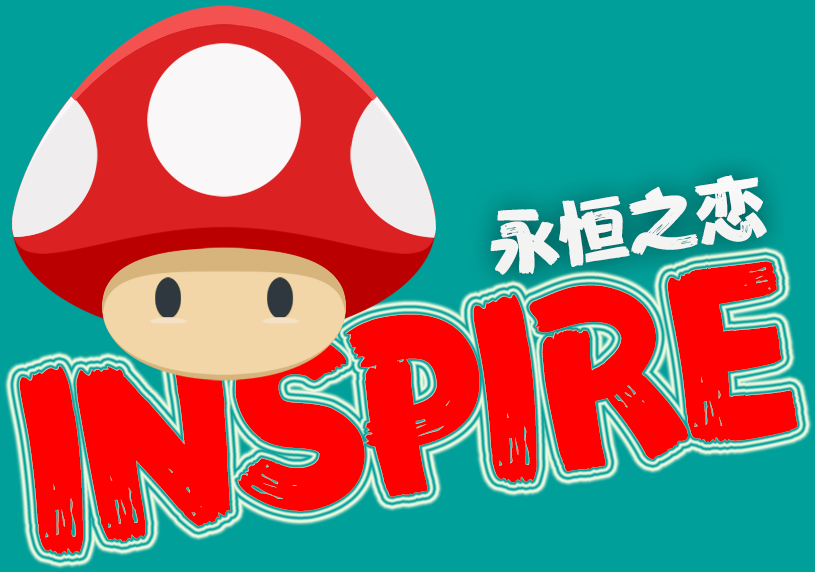
<style>
.page{position:relative;width:815px;height:572px;background:#019f99}
.page>*{position:absolute;margin:0}
.t1{font:69.6px "FZFENSTXJW--GB1-0";color:#ffffff}
.t2{font:218.7px "FZFENSTXJW--GB1-0";letter-spacing:-0.08em;color:#ff0000}
</style>
<div class="page">
<p class="t1" style="left:490px;top:175px;width:277px;height:100px;rotate:-9deg">永恒之恋</p>
<p class="t2" style="left:19px;top:261px;width:779px;height:294px;rotate:-9deg">INSPIRE</p>
</div>
